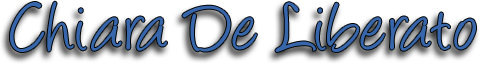
<style>
.page{position:relative;width:480px;height:64px;background:#ffffff}
.page>*{position:absolute;margin:0}
.t1{font:80px "Angelina";color:#3866ab}
</style>
<div class="page">
<p class="t1" style="left:10px;top:1px;width:466px;height:51px">Chiara De Liberato</p>
</div>
